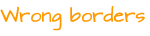
<style>
.page{position:relative;width:150px;height:36px;background:#ffffff}
.page>*{position:absolute;margin:0}
.t1{font:16px "ArchitectsDaughter";color:#ff9900}
</style>
<div class="page">
<p class="t1" style="left:0px;top:6px;width:145px;height:25px">Wrong borders</p>
</div>
